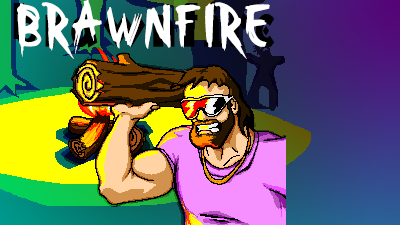
<style>
.page{position:relative;width:400px;height:225px}
.page>*{position:absolute;margin:0}
.t1{font:54.1px "Broken-Regular";letter-spacing:0.1em;color:#ffffff;scale:0.68 1}
</style>
<div class="page">
<p class="t1" style="left:17px;top:0px;width:253px;height:59px">BRAWNFIRE</p>
</div>
